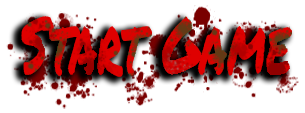
<style>
.page{position:relative;width:305px;height:113px;background:#ffffff}
.page>*{position:absolute;margin:0}
.t1{font:79.1px "PermanentMarker";scale:0.6 1}
</style>
<div class="page">
<p class="t1" style="left:21px;top:16px;width:271px;height:61px">Start Game</p>
</div>
